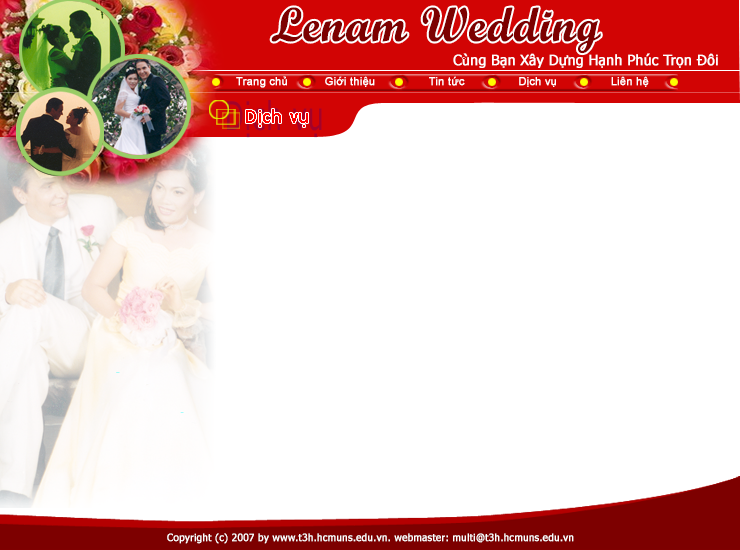
<style>
.page{position:relative;width:740px;height:550px;background:#ffffff}
.page>*{position:absolute;margin:0}
.t1{font:48px "ScriptMTBold";color:#7d0000;font-weight:bold}
.t2{font:14px "Tahoma";color:#ffffff;font-weight:bold}
.t3{font:11px "ArialMT";color:#ffffff;font-weight:bold}
.t4{font:39.4px "Tahoma";letter-spacing:0.05em;scale:0.69 1}
.t5{font:18px "Tahoma";letter-spacing:0.05em;color:#ff0000}
.t6{font:10px "Tahoma";color:#ffffff;font-weight:bold}
</style>
<div class="page">
<p class="t1" style="left:271px;top:7px;width:330px;height:47px">Lenam Wedding</p>
<p class="t2" style="left:453px;top:53px;width:265px;height:15px">Cùng Bạn Xây Dựng Hạnh Phúc Trọn Đôi</p>
<p class="t3" style="left:236px;top:76px;width:413px;height:12px">Trang chủ           Giới thiệu                Tin tức                Dịch vụ                Liên hệ</p>
<p class="t4" style="left:227px;top:100px;width:95px;height:38px">Dịch vụ</p>
<p class="t5" style="left:246px;top:109px;width:62px;height:18px">Dịch vụ</p>
<p class="t6" style="left:167px;top:533px;width:407px;height:11px">Copyright (c) 2007 by www.t3h.hcmuns.edu.vn. webmaster: multi@t3h.hcmuns.edu.vn</p>
</div>
